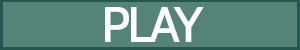
<style>
.page{position:relative;width:300px;height:50px;background:#558377}
.page>*{position:absolute;margin:0}
.t1{font:50px "Cabin-Medium";letter-spacing:-0.06em;color:#ffffff;text-transform:uppercase}
</style>
<div class="page">
<p class="t1" style="left:105px;top:7px;width:99px;height:35px">Play</p>
</div>
